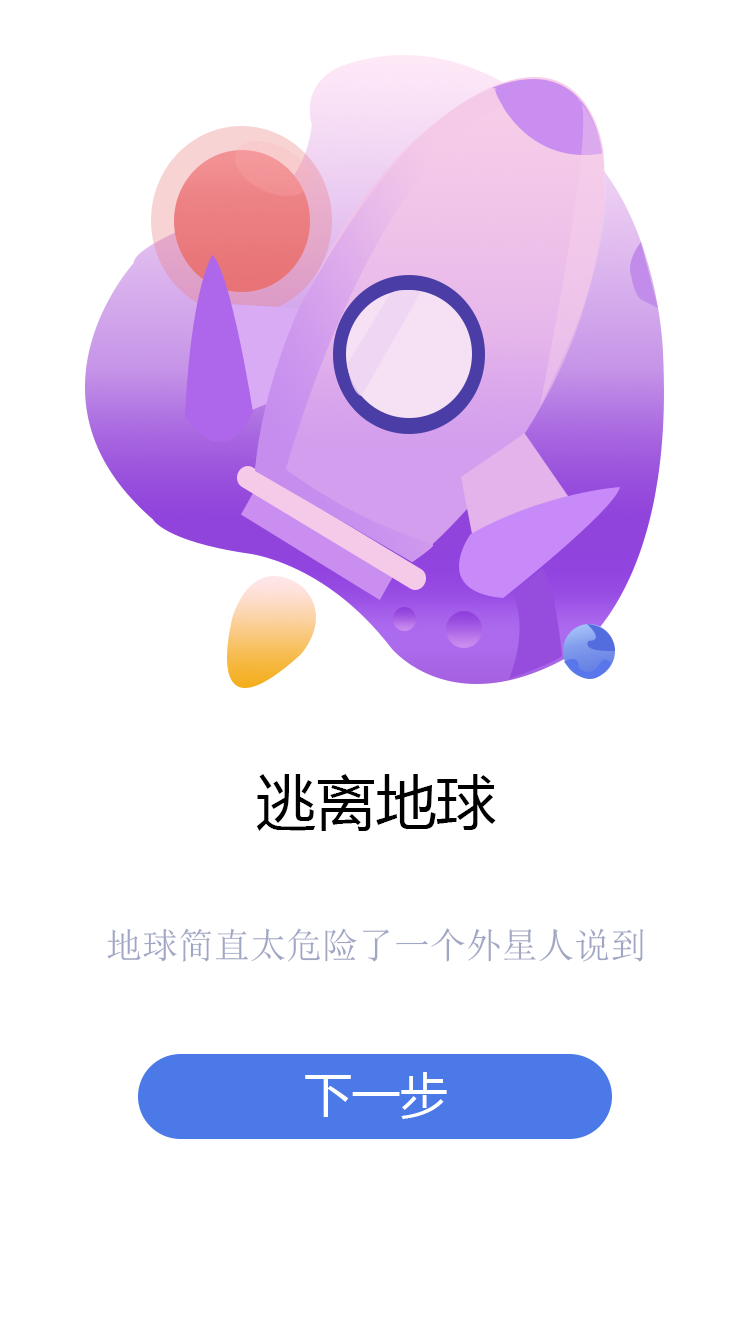
<style>
.page{position:relative;width:750px;height:1334px;background:#ffffff}
.page>*{position:absolute;margin:0}
.t1{font:60px "MicrosoftYaHei";color:#000000}
.t2{font:36px "SimSun";color:#a0a6c4}
.t3{font:48px "MicrosoftYaHei";color:#ffffff}
</style>
<div class="page">
<p class="t1" style="left:256px;top:774px;width:240px;height:57px">逃离地球</p>
<p class="t2" style="left:107px;top:928px;width:537px;height:34px">地球简直太危险了一个外星人说到</p>
<p class="t3" style="left:305px;top:1072px;width:142px;height:47px">下一步</p>
</div>
